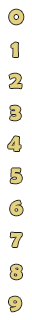
<style>
.page{position:relative;width:32px;height:320px;background:#ffffff}
.page>*{position:absolute;margin:0}
.t1{font:24px "BerlinSansFBDemi-Bold";color:#e4d280}
</style>
<div class="page">
<p class="t1" style="left:9px;top:9px;width:15px;height:16px">0</p>
<p class="t1" style="left:11px;top:42px;width:7px;height:15px">1</p>
<p class="t1" style="left:9px;top:73px;width:13px;height:16px">2</p>
<p class="t1" style="left:10px;top:105px;width:11px;height:16px">3</p>
<p class="t1" style="left:8px;top:136px;width:13px;height:15px">4</p>
<p class="t1" style="left:10px;top:168px;width:12px;height:16px">5</p>
<p class="t1" style="left:10px;top:200px;width:13px;height:16px">6</p>
<p class="t1" style="left:10px;top:232px;width:12px;height:15px">7</p>
<p class="t1" style="left:10px;top:264px;width:12px;height:16px">8</p>
<p class="t1" style="left:9px;top:296px;width:13px;height:16px">9</p>
</div>
